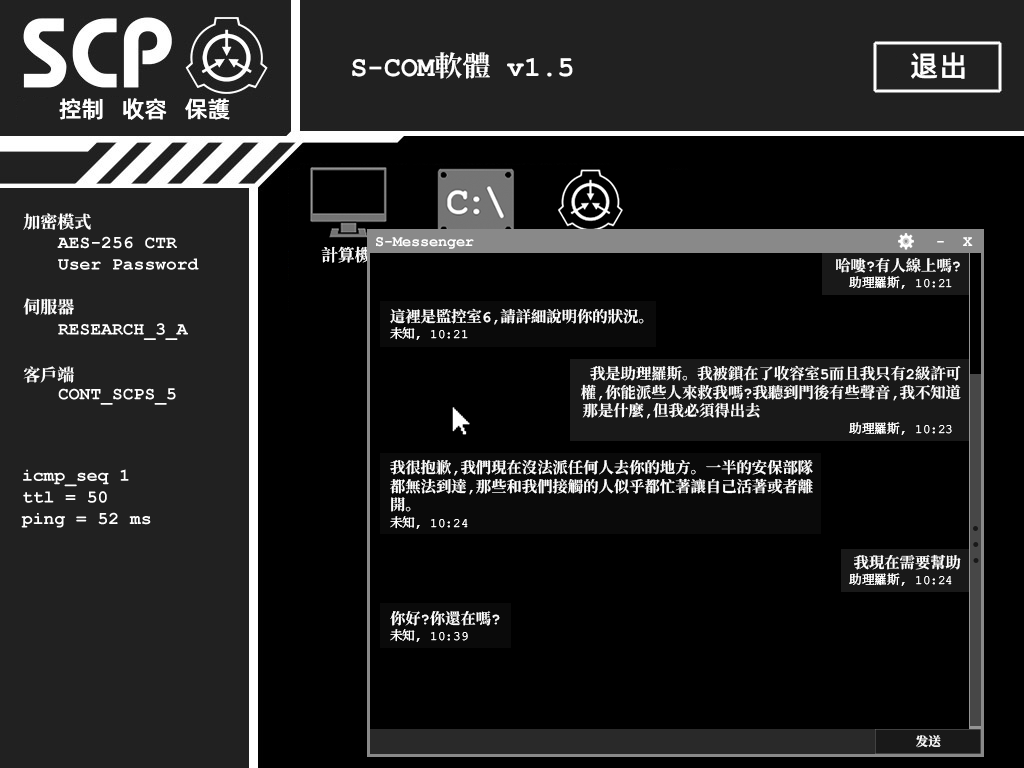
<style>
.page{position:relative;width:1024px;height:768px;background:#000000}
.page>*{position:absolute;margin:0}
.t1{font:28px "ContainmentBreach-Bold";color:#ffffff}
.t2{font:29px "AlibabaPuHuiTiM";color:#ffffff}
.t3{font:23px "AlibabaPuHuiTiM";color:#ffffff}
.t4{font:17px/17px "ContainmentBreach-Bold";color:#ffffff}
.t5{font:16.7px "ContainmentBreach-Bold";color:#ffffff}
.t6{font:12.7px/18.7px "ContainmentBreach-Regular";color:#ffffff}
.t7{font:15.3px/18.7px "ContainmentBreach-Bold";color:#ffffff}
.t8{font:12.7px "ContainmentBreach-Bold";color:#ffffff}
</style>
<div class="page">
<p class="t1" style="left:352px;top:52px;width:221px;height:27px">S-COM軟體 v1.5</p>
<p class="t2" style="left:911px;top:52px;width:54px;height:27px">退出</p>
<p class="t3" style="left:59px;top:98px;width:171px;height:22px">控制   收容   保護</p>
<p class="t4" style="left:23px;top:213px;width:68px;height:170px">加密模式<br><br><br><br><br>伺服器<br><br><br><br>客戶端</p>
<p class="t5" style="left:321px;top:246px;width:50px;height:17px">計算機</p>
<p class="t6" style="left:836px;top:257px;width:124px;height:32px;text-align:right"><span class="t7">哈嘍?有人線上嗎?<br></span>助理羅斯， 10:21</p>
<p class="t7" style="left:390px;top:308px;width:254px;height:32px">這裡是監控室6,請詳細說明你的狀況。<br><span class="t6">未知， 10:21</span></p>
<p class="t7" style="left:581px;top:365px;width:380px;height:70px;text-align:right">我是助理羅斯。我被鎖在了收容室5而且我只有2級許可<br>權,你能派些人來救我嗎?我聽到門後有些聲音,我不知道<br>那是什麼,但我必須得出去        <br><span class="t6">助理羅斯， 10:23</span></p>
<p class="t7" style="left:390px;top:459px;width:423px;height:70px">我很抱歉,我們現在沒法派任何人去你的地方。一半的安保部隊<br>都無法到達,那些和我們接觸的人似乎都忙著讓自己活著或者離<br>開。<br><span class="t6">未知， 10:24</span></p>
<p class="t6" style="left:849px;top:554px;width:112px;height:32px;text-align:right"><span class="t7">我現在需要幫助<br></span>助理羅斯， 10:24</p>
<p class="t6" style="left:390px;top:611px;width:110px;height:31px"><span class="t7">你好?你還在嗎?<br></span>未知， 10:39</p>
<p class="t8" style="left:916px;top:735px;width:25px;height:13px">发送</p>
</div>
